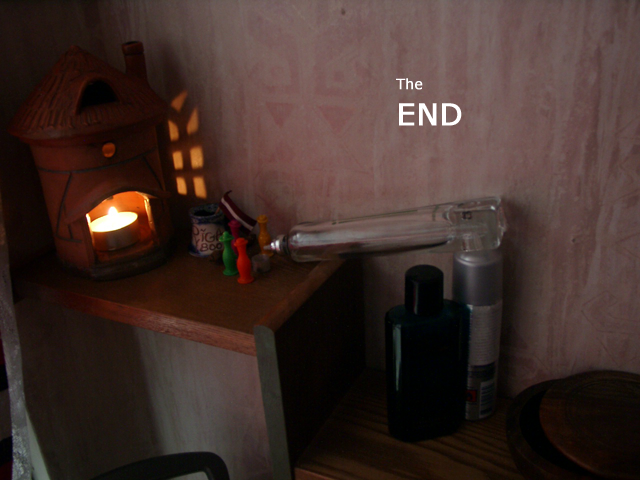
<style>
.page{position:relative;width:640px;height:480px}
.page>*{position:absolute;margin:0}
.t1{font:14px "Verdana";color:#ffffff;font-weight:bold}
.t2{font:30px "Verdana";color:#ffffff;font-weight:bold}
</style>
<div class="page">
<p class="t1" style="left:396px;top:78px;width:66px;height:48px">The<span class="t2"> <br>END</span></p>
</div>
